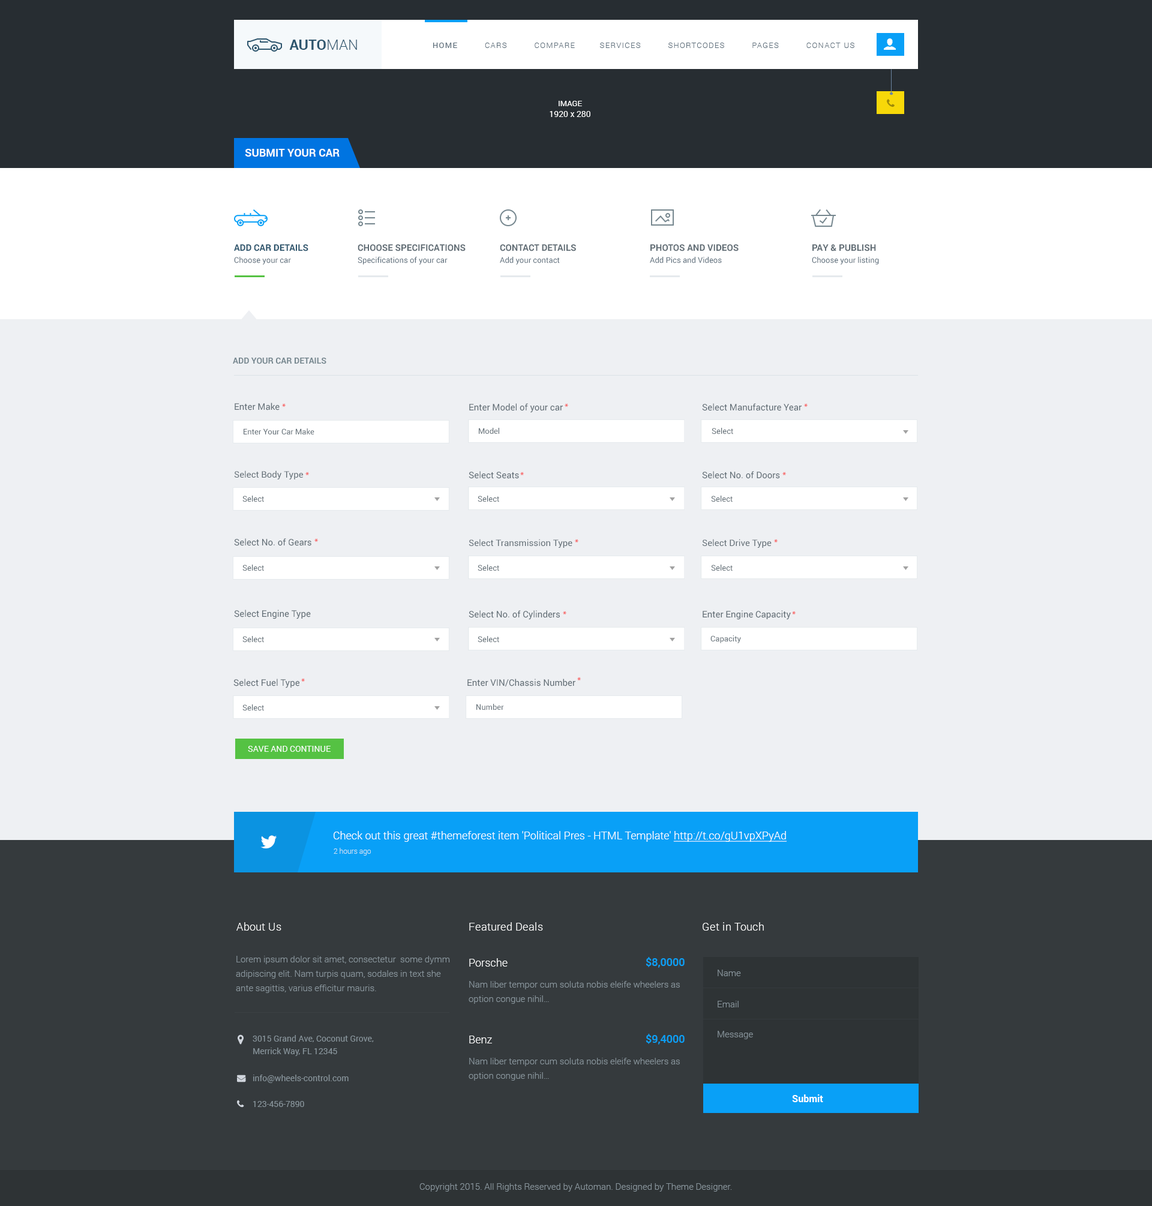
<style>
.page{position:relative;width:1152px;height:1206px;background:#eef0f3}
.page>*{position:absolute;margin:0}
.t1{font:14.4px "Roboto-Bold";color:#2e566e;text-transform:uppercase}
.t2{font:14.4px "Roboto-Light";color:#2e566e;text-transform:uppercase}
.t3{font:7.8px "Roboto-Light";letter-spacing:0.1em;color:#5d6e7b;text-transform:uppercase}
.t4{font:7.8px "Roboto-Regular";letter-spacing:0.1em;color:#5d6e7b;text-transform:uppercase}
.t5{font:8.4px/10.8px "Roboto-Regular";color:#ffffff}
.t6{font:7.8px/10.8px "Roboto-Regular";color:#ffffff}
.t7{font:10.8px "Roboto-Bold";color:#ffffff;text-transform:uppercase}
.t8{font:9px/12px "Roboto-Bold";color:#2e566e;text-transform:uppercase}
.t9{font:7.8px/12px "Roboto-Regular";color:#5d6e7b}
.t10{font:9px/12px "Roboto-Bold";color:#616d75;text-transform:uppercase}
.t11{font:8.4px "Roboto-Bold";color:#76878f;text-transform:uppercase}
.t12{font:9px "Roboto-Regular";color:#616d75}
.t13{font:9px "MyriadPro-Regular"}
.t14{font:7.8px "Roboto-Regular";color:#616d75}
.t15{font:8.4px "Roboto-Regular";color:#ffffff;text-transform:uppercase}
.t16{font:10.8px "Roboto-Light";color:#ffffff}
.t17{font:10.8px "Roboto-Light";color:#ffffff;text-decoration:underline}
.t18{font:7.2px "Roboto-Light";color:#c3e1f4}
.t19{font:10.8px "Roboto-Light";letter-spacing:0.025em;color:#ffffff}
.t20{font:9px/14.4px "Roboto-Light";color:#88949b}
.t21{font:10.8px "Roboto-Medium";color:#09a0f7}
.t22{font:9px "Roboto-Light";color:#88949b}
.t23{font:8.4px/12.6px "Roboto-Regular";color:#88949b}
.t24{font:8.4px "Roboto-Regular";color:#88949b}
.t25{font:9.6px "Roboto-Bold";color:#ffffff}
</style>
<div class="page">
<p class="t1" style="left:289px;top:40px;width:68px;height:10px">Auto<span class="t2">man</span></p>
<p class="t3" style="left:433px;top:43px;width:421px;height:5px"><span class="t4">Home</span>          Cars          COMPARE         Services          Shortcodes          Pages          Conact us</p>
<p class="t5" style="left:550px;top:101px;width:40px;height:16px;text-align:center"><span class="t6">IMAGE<br></span>1920 x 280</p>
<p class="t7" style="left:245px;top:149px;width:95px;height:8px">Submit your car</p>
<p class="t8" style="left:234px;top:244px;width:74px;height:21px">ADD CAR DETAILS<br><span class="t9">Choose your car</span></p>
<p class="t9" style="left:358px;top:244px;width:108px;height:21px"><span class="t10">CHOOSE SPECIFICATIONS<br></span>Specifications of your car</p>
<p class="t9" style="left:500px;top:244px;width:76px;height:21px"><span class="t10">CONTACT DETAILS<br></span>Add your contact</p>
<p class="t9" style="left:650px;top:244px;width:89px;height:19px"><span class="t10">PHOTOS AND VIDEOS<br></span>Add Pics and Videos</p>
<p class="t9" style="left:812px;top:244px;width:67px;height:21px"><span class="t10">PAY &amp; PUBLISH<br></span>Choose your listing</p>
<p class="t11" style="left:233px;top:358px;width:93px;height:6px">Add YOUR CAR DETAILS</p>
<p class="t12" style="left:235px;top:403px;width:45px;height:7px">Enter Make</p>
<p class="t13" style="left:282px;top:403px;width:4px;height:4px">*</p>
<p class="t12" style="left:469px;top:403px;width:94px;height:10px">Enter Model of your car</p>
<p class="t13" style="left:565px;top:403px;width:3px;height:4px">*</p>
<p class="t12" style="left:702px;top:403px;width:100px;height:8px">Select Manufacture Year</p>
<p class="t13" style="left:804px;top:403px;width:4px;height:4px">*</p>
<p class="t14" style="left:244px;top:428px;width:70px;height:7px">Enter Your Car Make</p>
<p class="t14" style="left:479px;top:428px;width:20px;height:6px">Model</p>
<p class="t14" style="left:712px;top:428px;width:21px;height:6px">Select</p>
<p class="t12" style="left:234px;top:470px;width:69px;height:9px">Select Body Type</p>
<p class="t13" style="left:305px;top:472px;width:4px;height:3px">*</p>
<p class="t12" style="left:469px;top:471px;width:50px;height:8px">Select Seats</p>
<p class="t13" style="left:520px;top:472px;width:4px;height:3px">*</p>
<p class="t12" style="left:702px;top:471px;width:78px;height:8px">Select No. of Doors</p>
<p class="t13" style="left:782px;top:472px;width:4px;height:3px">*</p>
<p class="t14" style="left:242px;top:496px;width:22px;height:6px">Select</p>
<p class="t14" style="left:478px;top:496px;width:21px;height:6px">Select</p>
<p class="t14" style="left:711px;top:496px;width:22px;height:6px">Select</p>
<p class="t12" style="left:234px;top:538px;width:77px;height:8px">Select No. of Gears</p>
<p class="t13" style="left:314px;top:538px;width:4px;height:4px">*</p>
<p class="t12" style="left:469px;top:539px;width:103px;height:9px">Select Transmission Type</p>
<p class="t13" style="left:575px;top:539px;width:3px;height:3px">*</p>
<p class="t12" style="left:702px;top:539px;width:70px;height:9px">Select Drive Type</p>
<p class="t13" style="left:774px;top:539px;width:4px;height:3px">*</p>
<p class="t14" style="left:242px;top:565px;width:22px;height:6px">Select</p>
<p class="t14" style="left:478px;top:565px;width:21px;height:6px">Select</p>
<p class="t14" style="left:711px;top:565px;width:22px;height:6px">Select</p>
<p class="t12" style="left:234px;top:610px;width:77px;height:9px">Select Engine Type</p>
<p class="t12" style="left:469px;top:610px;width:91px;height:10px">Select No. of Cylinders</p>
<p class="t13" style="left:563px;top:611px;width:3px;height:3px">*</p>
<p class="t12" style="left:703px;top:610px;width:88px;height:10px">Enter Engine Capacity</p>
<p class="t13" style="left:792px;top:611px;width:4px;height:3px">*</p>
<p class="t14" style="left:242px;top:636px;width:22px;height:7px">Select</p>
<p class="t14" style="left:478px;top:636px;width:21px;height:7px">Select</p>
<p class="t14" style="left:710px;top:635px;width:31px;height:8px">Capacity</p>
<p class="t13" style="left:301px;top:678px;width:4px;height:4px">*</p>
<p class="t13" style="left:577px;top:677px;width:4px;height:3px">*</p>
<p class="t12" style="left:233px;top:679px;width:66px;height:9px">Select Fuel Type</p>
<p class="t12" style="left:467px;top:679px;width:108px;height:7px">Enter VIN/Chassis Number</p>
<p class="t14" style="left:242px;top:704px;width:22px;height:7px">Select</p>
<p class="t14" style="left:476px;top:704px;width:28px;height:6px">Number</p>
<p class="t15" style="left:248px;top:746px;width:83px;height:6px">Save and Continue</p>
<p class="t16" style="left:334px;top:831px;width:453px;height:11px">Check out this great #themeforest item 'Political Pres - HTML Template' <span class="t17">http://t.co/gU1vpXPyAd</span></p>
<p class="t18" style="left:334px;top:848px;width:37px;height:8px">2 hours ago</p>
<p class="t19" style="left:236px;top:922px;width:45px;height:9px">About Us</p>
<p class="t19" style="left:469px;top:922px;width:74px;height:9px">Featured Deals</p>
<p class="t19" style="left:703px;top:922px;width:61px;height:9px">Get in Touch</p>
<p class="t20" style="left:236px;top:956px;width:214px;height:37px">Lorem ipsum dolor sit amet, consectetur  some dymm<br>adipiscing elit. Nam turpis quam, sodales in text she<br>ante sagittis, varius efficitur mauris.</p>
<p class="t16" style="left:469px;top:958px;width:39px;height:9px">Porsche</p>
<p class="t21" style="left:646px;top:957px;width:39px;height:11px">$8,0000</p>
<p class="t22" style="left:718px;top:970px;width:23px;height:6px">Name</p>
<p class="t20" style="left:469px;top:981px;width:211px;height:23px">Nam liber tempor cum soluta nobis eleife wheelers as<br>option congue nihil…</p>
<p class="t22" style="left:718px;top:1001px;width:21px;height:6px">Email</p>
<p class="t23" style="left:253px;top:1035px;width:121px;height:21px">3015 Grand Ave, Coconut Grove,<br>Merrick Way, FL 12345</p>
<p class="t16" style="left:469px;top:1036px;width:23px;height:7px">Benz</p>
<p class="t21" style="left:646px;top:1034px;width:39px;height:11px">$9,4000</p>
<p class="t22" style="left:718px;top:1031px;width:35px;height:8px">Message</p>
<p class="t20" style="left:469px;top:1058px;width:211px;height:23px">Nam liber tempor cum soluta nobis eleife wheelers as<br>option congue nihil…</p>
<p class="t24" style="left:253px;top:1075px;width:96px;height:8px">info@wheels-control.com</p>
<p class="t25" style="left:792px;top:1094px;width:31px;height:8px">Submit</p>
<p class="t24" style="left:253px;top:1101px;width:51px;height:6px">123-456-7890</p>
<p class="t22" style="left:419px;top:1183px;width:313px;height:9px">Copyright 2015. All Rights Reserved by Automan. Designed by Theme Designer.</p>
</div>
